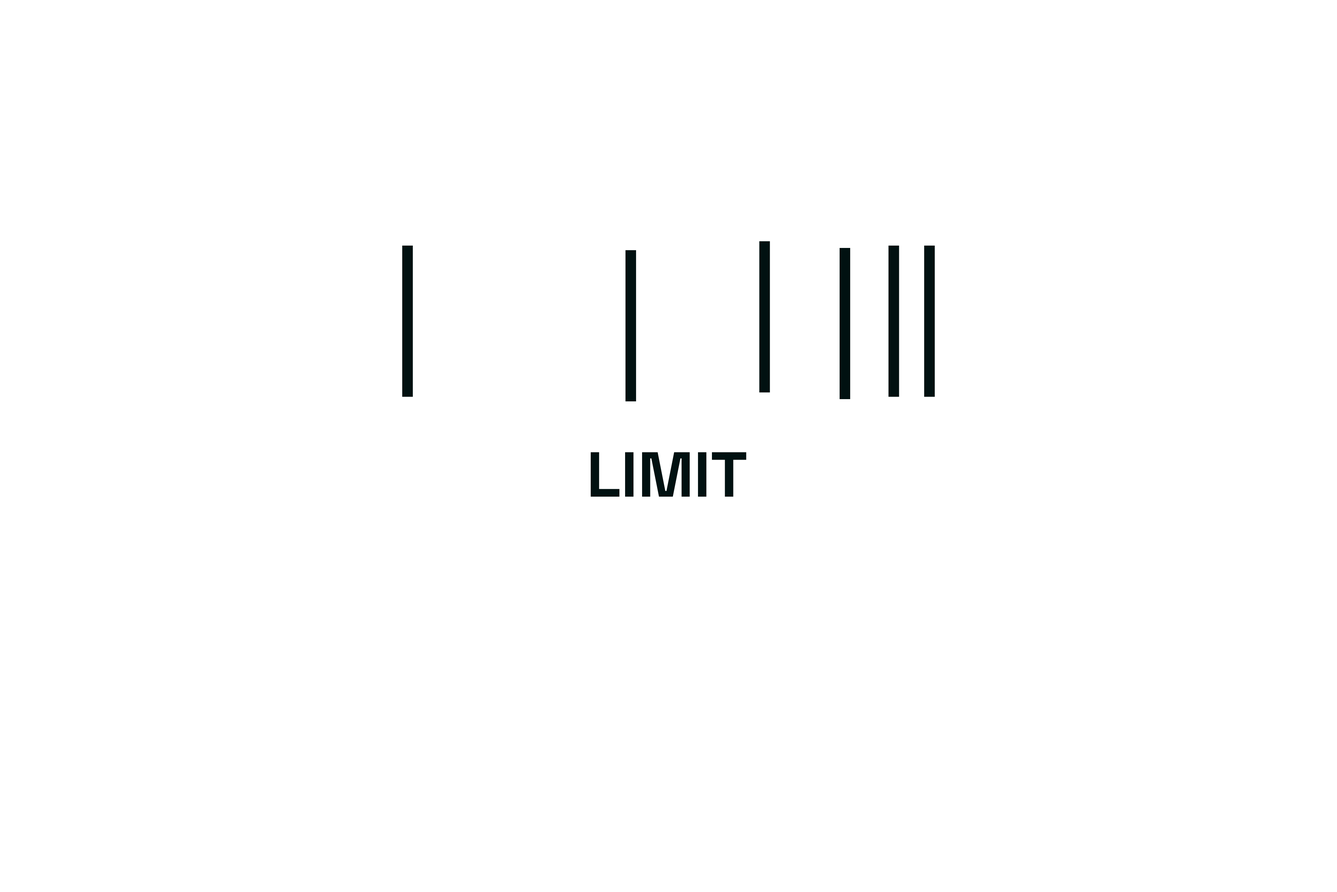
<style>
.page{position:relative;width:1337px;height:892px;background:#ffffff}
.page>*{position:absolute;margin:0}
.t1{font:63.5px "SpaceGroteskLight-Bold";color:#011111}
</style>
<div class="page">
<p class="t1" style="left:591px;top:452px;width:156px;height:44px">LIMIT</p>
</div>
